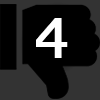
<style>
.page{position:relative;width:100px;height:100px;background:#000000}
.page>*{position:absolute;margin:0}
.t1{font:54.2px "Verdana";color:#ffffff;font-weight:bold}
</style>
<div class="page">
<p class="t1" style="left:36px;top:18px;width:32px;height:40px">4</p>
</div>
